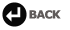
<style>
.page{position:relative;width:70px;height:30px;background:#ffffff}
.page>*{position:absolute;margin:0}
.t1{font:11px "Verdana-Bold";letter-spacing:-0.05em;color:#5f5a59}
</style>
<div class="page">
<p class="t1" style="left:29px;top:10px;width:32px;height:9px">BACK</p>
</div>
